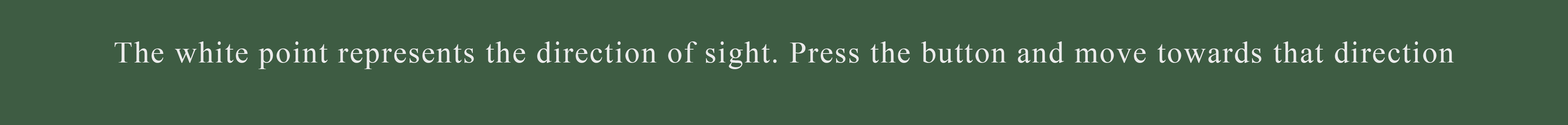
<style>
.page{position:relative;width:1568px;height:125px;background:#3e5c43}
.page>*{position:absolute;margin:0}
.t1{font:30.4px "TimesNewRomanPSMT";letter-spacing:0.05em;color:#ebebeb}
</style>
<div class="page">
<p class="t1" style="left:114px;top:42px;width:1340px;height:27px">The white point represents the direction of sight. Press the button and move towards that direction</p>
</div>
